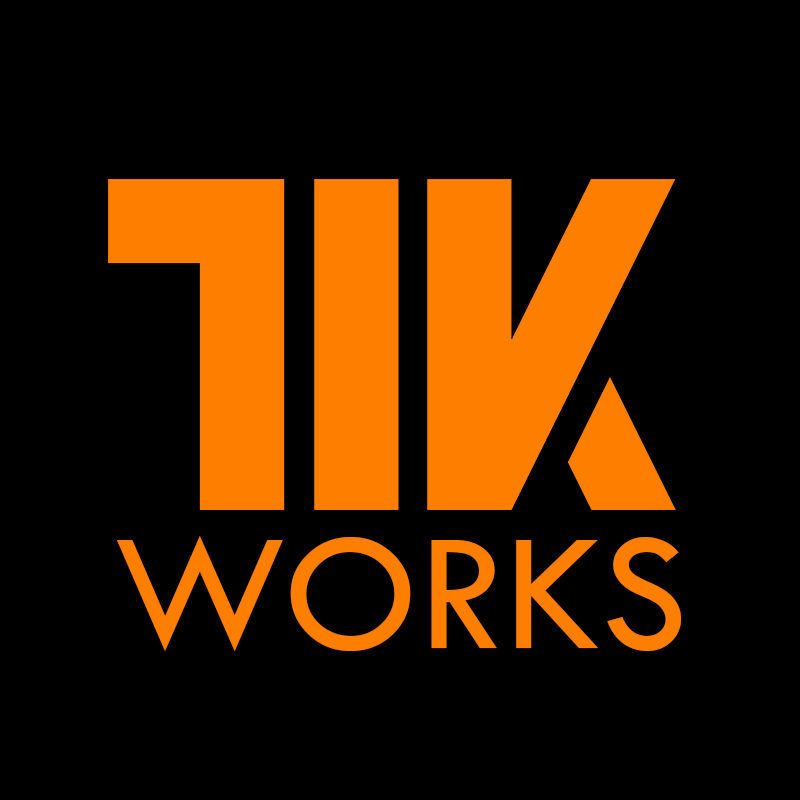
<style>
.page{position:relative;width:800px;height:800px;background:#000000}
.page>*{position:absolute;margin:0}
.t1{font:173.9px "TwCenMT-Regular";color:#fe7e00}
</style>
<div class="page">
<p class="t1" style="left:116px;top:536px;width:566px;height:115px">WORKS</p>
</div>
